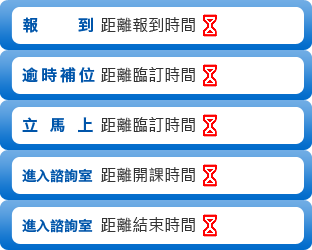
<style>
.page{position:relative;width:312px;height:250px;background:#ffffff}
.page>*{position:absolute;margin:0}
.t1{font:16px "HiraginoSansGB-W6";letter-spacing:2.48em;color:#0055aa}
.t2{font:16px "MicrosoftJhengHeiRegular";color:#333333}
.t3{font:16px "HiraginoSansGB-W6";letter-spacing:0.18em;color:#0055aa}
.t4{font:16px "HiraginoSansGB-W6";letter-spacing:0.72em;color:#0055aa}
.t5{font:14px "HiraginoSansGB-W6";color:#0055aa}
</style>
<div class="page">
<p class="t1" style="left:23px;top:17px;width:70px;height:16px">報到</p>
<p class="t2" style="left:101px;top:17px;width:94px;height:15px">距離報到時間</p>
<p class="t3" style="left:22px;top:67px;width:73px;height:16px">逾時補位</p>
<p class="t2" style="left:101px;top:67px;width:94px;height:15px">距離臨訂時間</p>
<p class="t4" style="left:22px;top:117px;width:71px;height:16px">立馬上</p>
<p class="t2" style="left:101px;top:117px;width:94px;height:15px">距離臨訂時間</p>
<p class="t5" style="left:22px;top:168px;width:71px;height:15px">進入諮詢室</p>
<p class="t2" style="left:101px;top:167px;width:94px;height:15px">距離開課時間</p>
<p class="t5" style="left:22px;top:218px;width:71px;height:15px">進入諮詢室</p>
<p class="t2" style="left:101px;top:217px;width:94px;height:15px">距離結束時間</p>
</div>
